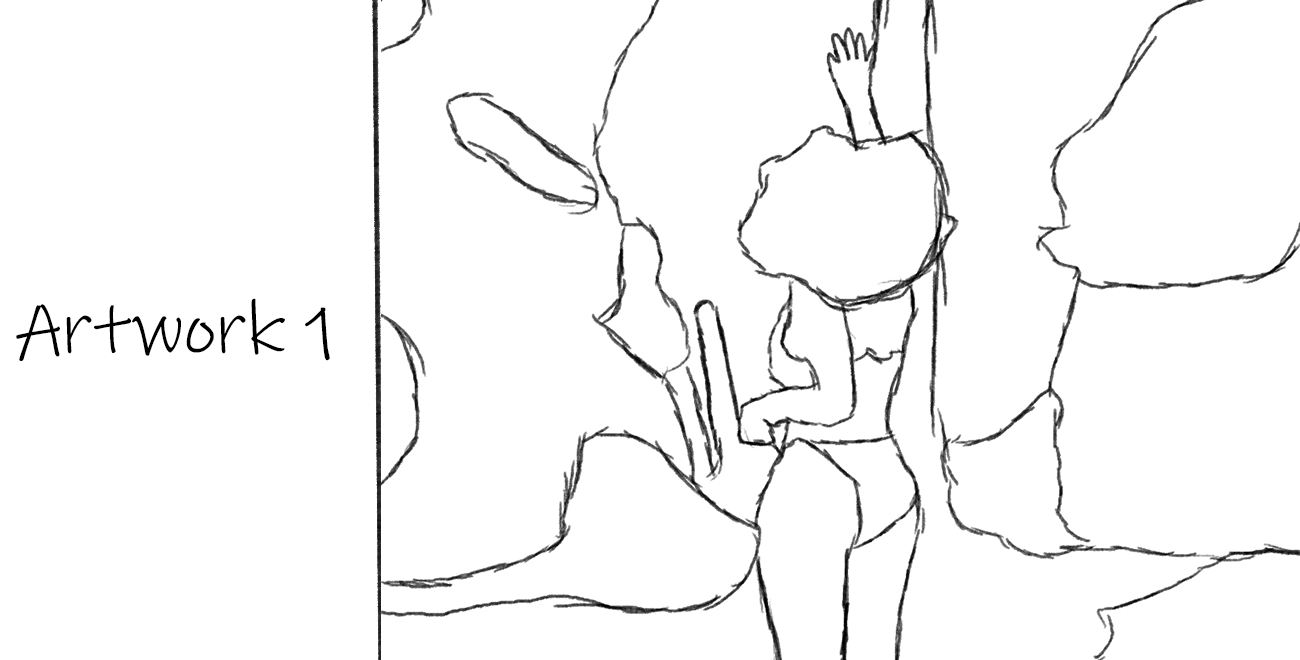
<style>
.page{position:relative;width:1300px;height:660px;background:#ffffff}
.page>*{position:absolute;margin:0}
.t1{font:75px "InkFree";color:#000000}
</style>
<div class="page">
<p class="t1" style="left:16px;top:298px;width:314px;height:63px">Artwork 1</p>
</div>
